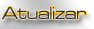
<style>
.page{position:relative;width:94px;height:29px}
.page>*{position:absolute;margin:0}
.t1{font:18px "MicrogrammaD-MediExte";color:#313131}
</style>
<div class="page">
<p class="t1" style="left:2px;top:7px;width:84px;height:12px">Atualizar</p>
</div>
